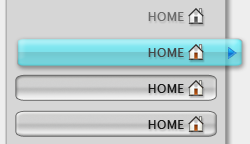
<style>
.page{position:relative;width:250px;height:144px;background:#d6d6d6}
.page>*{position:absolute;margin:0}
.t1{font:12.3px "LucidaSans";letter-spacing:0.006em;color:#6b6b6b}
.t2{font:12.3px "LucidaSans";letter-spacing:0.006em;color:#454545}
.t3{font:12.3px "LucidaSans";letter-spacing:0.006em;color:#191919}
</style>
<div class="page">
<p class="t1" style="left:148px;top:12px;width:36px;height:9px">HOME</p>
<p class="t2" style="left:148px;top:48px;width:36px;height:9px">HOME</p>
<p class="t3" style="left:148px;top:84px;width:36px;height:9px">HOME</p>
<p class="t3" style="left:148px;top:120px;width:36px;height:9px">HOME</p>
</div>
